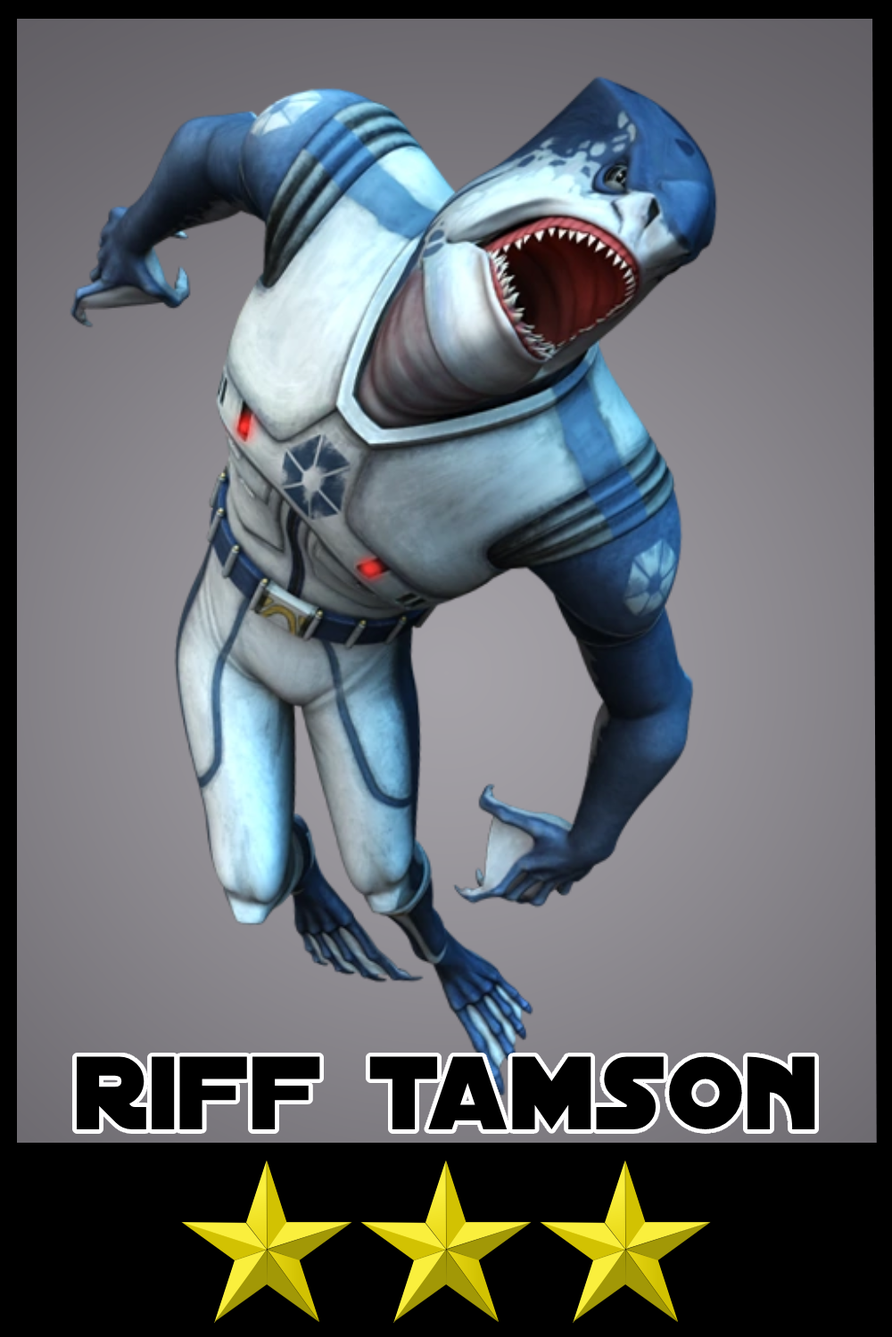
<style>
.page{position:relative;width:892px;height:1337px}
.page>*{position:absolute;margin:0}
.t1{font:111.9px "DistantGalaxy";color:#000000}
</style>
<div class="page">
<p class="t1" style="left:77px;top:1057px;width:738px;height:73px">riff tamson</p>
</div>
